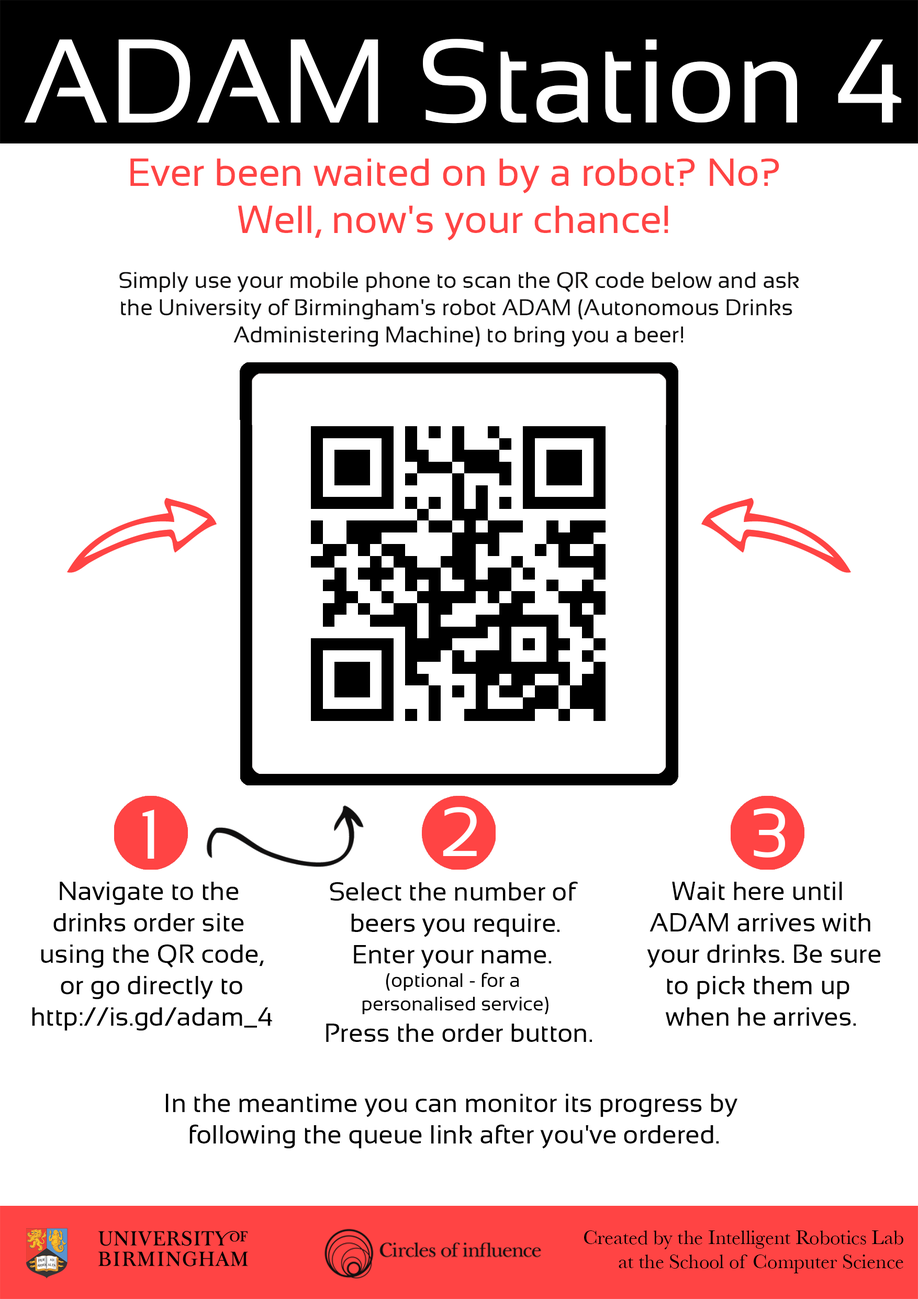
<style>
.page{position:relative;width:918px;height:1299px;background:#ffffff}
.page>*{position:absolute;margin:0}
.t1{font:118.9px "Sansation-Regular";color:#ffffff}
.t2{font:22.7px "Sansation-Regular";color:#100f0f}
.t3{font:39.3px "Sansation-Regular";color:#ff4444}
.t4{font:69.8px "Sansation-Regular";color:#ffffff}
.t5{font:26.2px "Sansation-Regular";color:#000000}
.t6{font:19.6px "Sansation-Regular";color:#000000}
.t7{font:20.2px "Baskerville";color:#000000}
</style>
<div class="page">
<p class="t1" style="left:24px;top:39px;width:877px;height:85px">ADAM Station 4</p>
<p class="t2" style="left:119px;top:158px;width:680px;height:189px;text-align:center"><span class="t3">Ever been waited on by a robot? No? <br>Well, now's your chance! <br></span><br>Simply use your mobile phone to scan the QR code below and ask<br>the University of Birmingham's robot ADAM (Autonomous Drinks <br>Administering Machine) to bring you a beer!</p>
<p class="t4" style="left:142px;top:809px;width:12px;height:49px">1</p>
<p class="t4" style="left:443px;top:807px;width:34px;height:49px">2</p>
<p class="t4" style="left:754px;top:808px;width:31px;height:49px">3</p>
<p class="t5" style="left:32px;top:882px;width:240px;height:149px;text-align:center">Navigate to the<br>drinks order site<br> using the QR code,<br> or go directly to<br> http://is.gd/adam_4</p>
<p class="t5" style="left:326px;top:881px;width:266px;height:161px;text-align:center">Select the number of <br>beers you require.<br>Enter your name. <br><span class="t6">(optional - for a <br>personalised service)<br></span> Press the order button.</p>
<p class="t5" style="left:647px;top:882px;width:234px;height:143px;text-align:center">Wait here until <br>ADAM arrives with<br> your drinks. Be sure<br>to pick them up <br>when he arrives.</p>
<p class="t5" style="left:166px;top:1094px;width:572px;height:54px;text-align:center">In the meantime you can monitor its progress by <br>following the queue link after you've ordered.</p>
<p class="t7" style="left:584px;top:1230px;width:320px;height:43px;text-align:right">Created by the Intelligent Robotics Lab<br>at the School of Computer Science</p>
</div>
